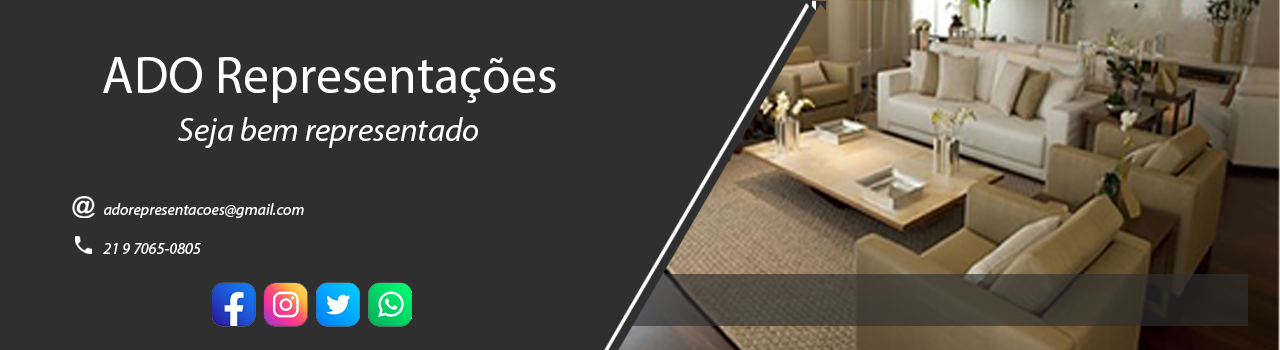
<style>
.page{position:relative;width:1280px;height:350px;background:#2f2f2f}
.page>*{position:absolute;margin:0}
.t1{font:52px "MyriadPro-Regular";color:#ffffff}
.t2{font:33px "MyriadPro-It";color:#ffffff}
.t3{font:16px "MyriadPro-It";color:#ffffff}
</style>
<div class="page">
<p class="t1" style="left:103px;top:57px;width:453px;height:46px">ADO Representações</p>
<p class="t2" style="left:178px;top:117px;width:300px;height:31px">Seja bem representado</p>
<p class="t3" style="left:104px;top:203px;width:200px;height:15px">adorepresentacoes@gmail.com</p>
<p class="t3" style="left:103px;top:243px;width:98px;height:11px">21 9 7065-0805</p>
</div>
